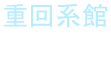
<style>
.page{position:relative;width:111px;height:60px;background:#ffffff}
.page>*{position:absolute;margin:0}
.t1{font:26.6px "MS-Gothic";color:#b8ecff}
</style>
<div class="page">
<p class="t1" style="left:3px;top:3px;width:105px;height:25px">重回系館</p>
</div>
